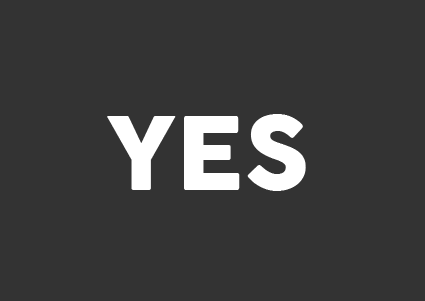
<style>
.page{position:relative;width:425px;height:301px;background:#333333}
.page>*{position:absolute;margin:0}
.t1{font:100px "Cocogoose";color:#ffffff}
</style>
<div class="page">
<p class="t1" style="left:107px;top:114px;width:199px;height:77px">YES</p>
</div>
